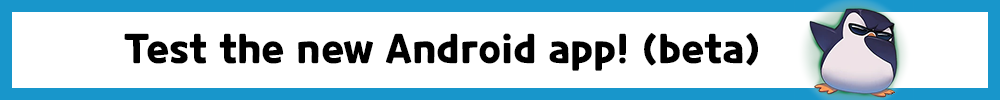
<style>
.page{position:relative;width:1000px;height:100px;background:#ffffff}
.page>*{position:absolute;margin:0}
.t1{font:40px "CookieRunOTF-Bold";color:#000000}
</style>
<div class="page">
<p class="t1" style="left:124px;top:33px;width:634px;height:38px">Test the new Android app! (beta)</p>
</div>
